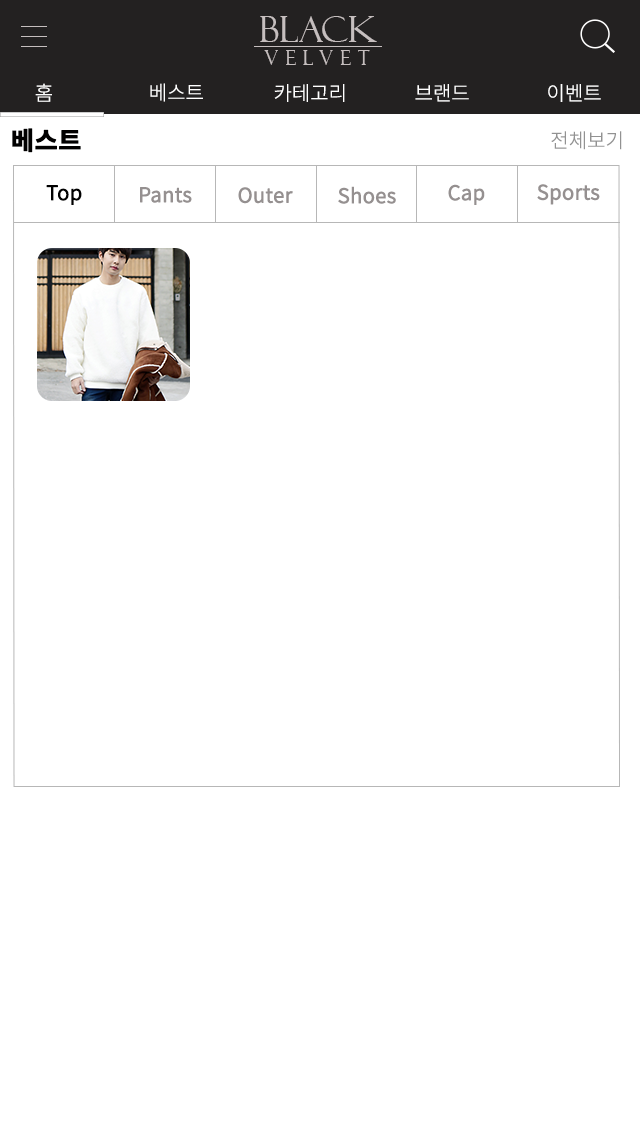
<style>
.page{position:relative;width:640px;height:1136px;background:#ffffff}
.page>*{position:absolute;margin:0}
.t1{font:36.4px "FelixTitlingMT";color:#c5bebe;scale:0.96 1}
.t2{font:19.8px "FelixTitlingMT";letter-spacing:0.4em;color:#c5bebe;scale:0.96 1}
.t3{font:20px "NotoSansCJKkr-Light";color:#ffffff}
.t4{font:25px "NotoSansCJKkr-Bold";color:#010000;font-weight:bold}
.t5{font:20px "NotoSansCJKkr-Light";color:#929292}
.t6{font:20px "NotoSansCJKkr-DemiLight";color:#000000;font-weight:bold}
.t7{font:20px "NotoSansCJKkr-DemiLight";color:#959090;font-weight:bold}
</style>
<div class="page">
<p class="t1" style="left:260px;top:16px;width:117px;height:26px">BLACK</p>
<p class="t2" style="left:264px;top:50px;width:106px;height:15px">VELVET</p>
<p class="t3" style="left:35px;top:83px;width:17px;height:19px">홈</p>
<p class="t3" style="left:150px;top:83px;width:53px;height:19px">베스트</p>
<p class="t3" style="left:274px;top:84px;width:71px;height:18px">카테고리</p>
<p class="t3" style="left:415px;top:84px;width:54px;height:18px">브랜드</p>
<p class="t3" style="left:548px;top:84px;width:53px;height:18px">이벤트</p>
<p class="t4" style="left:12px;top:128px;width:69px;height:25px">베스트</p>
<p class="t5" style="left:551px;top:131px;width:71px;height:19px">전체보기</p>
<p class="t6" style="left:46px;top:185px;width:36px;height:20px">Top</p>
<p class="t7" style="left:448px;top:184px;width:37px;height:21px">Cap</p>
<p class="t7" style="left:537px;top:184px;width:63px;height:21px">Sports</p>
<p class="t7" style="left:140px;top:187px;width:52px;height:16px">Pants</p>
<p class="t7" style="left:238px;top:187px;width:55px;height:17px">Outer</p>
<p class="t7" style="left:338px;top:186px;width:58px;height:18px">Shoes</p>
</div>
